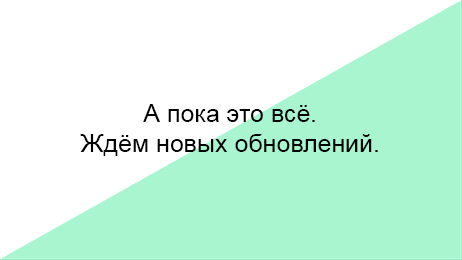
<style>
.page{position:relative;width:462px;height:260px;background:#a9f5d0}
.page>*{position:absolute;margin:0}
.t1{font:25px "ArialMT";color:#000000}
</style>
<div class="page">
<p class="t1" style="left:80px;top:104px;width:298px;height:52px;text-align:center">А пока это всё.<br>Ждём новых обновлений.</p>
</div>
